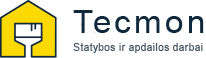
<style>
.page{position:relative;width:206px;height:58px;background:#ffffff}
.page>*{position:absolute;margin:0}
.t1{font:32px "ArialMT";letter-spacing:0.11em;color:#10283c}
.t2{font:11px "ArialMT";letter-spacing:0.05em;color:#405363;scale:0.9 1}
</style>
<div class="page">
<p class="t1" style="left:73px;top:10px;width:131px;height:23px">Tecmon</p>
<p class="t2" style="left:73px;top:43px;width:130px;height:10px">Statybos ir apdailos darbai</p>
</div>
